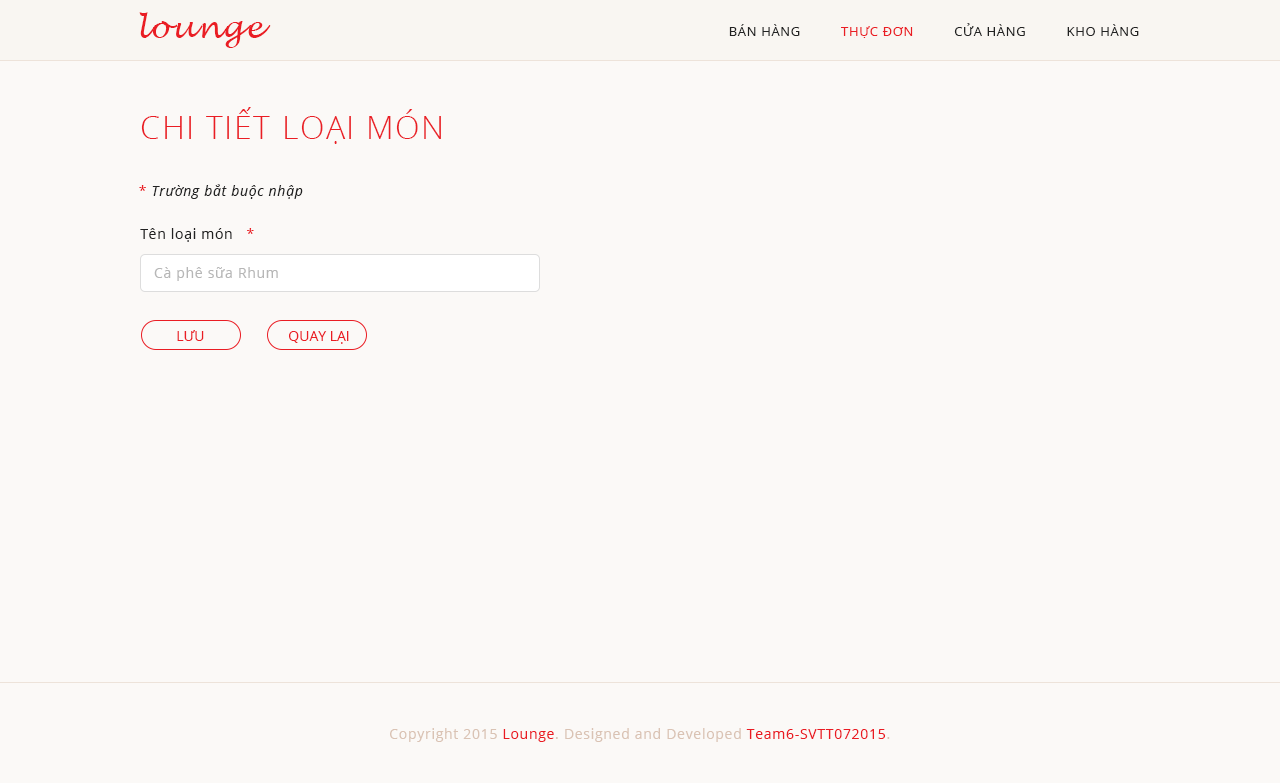
<style>
.page{position:relative;width:1280px;height:783px;background:#fbf9f7}
.page>*{position:absolute;margin:0}
.t1{font:30px "LucidaHandwriting-Italic";letter-spacing:0.05em;color:#ea1d24}
.t2{font:13px "OpenSans";letter-spacing:0.05em;color:#222222}
.t3{font:13px "OpenSans";letter-spacing:0.05em;color:#ea1d24}
.t4{font:32px "OpenSans-Light";letter-spacing:0.05em;color:#ea1d24}
.t5{font:14px "OpenSans-Italic";letter-spacing:0.05em;color:#222222}
.t6{font:14px "OpenSans";letter-spacing:0.05em;color:#ea1d24}
.t7{font:14px "OpenSans";letter-spacing:0.05em;color:#222222}
.t8{font:14px "OpenSans";letter-spacing:0.05em;color:#b7b7b7}
.t9{font:14px "OpenSans";color:#ea1d24}
.t10{font:14px "OpenSans";letter-spacing:0.05em;color:#dac3b4}
.t11{font:14px "OpenSans";letter-spacing:0.05em;color:#ea1b23}
</style>
<div class="page">
<p class="t1" style="left:139px;top:12px;width:132px;height:36px">lounge</p>
<p class="t2" style="left:729px;top:23px;width:410px;height:15px">BÁN HÀNG        <span class="t3">  THỰC ĐƠN   </span>       CỬA HÀNG          KHO HÀNG</p>
<p class="t4" style="left:141px;top:107px;width:300px;height:37px">CHI TIẾT LOẠI MÓN</p>
<p class="t5" style="left:139px;top:184px;width:164px;height:15px"><span class="t6">* </span>Trường bắt buộc nhập</p>
<p class="t7" style="left:140px;top:228px;width:114px;height:14px">Tên loại món   <span class="t6">*</span></p>
<p class="t8" style="left:154px;top:267px;width:124px;height:14px">Cà phê sữa Rhum</p>
<p class="t9" style="left:177px;top:330px;width:27px;height:11px">LƯU</p>
<p class="t9" style="left:289px;top:331px;width:60px;height:13px">QUAY LẠI</p>
<p class="t10" style="left:390px;top:728px;width:500px;height:14px">Copyright 2015 <span class="t11">Lounge</span>. Designed and Developed <span class="t11">Team6-SVTT072015</span>.</p>
</div>
